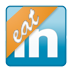
<style>
.page{position:relative;width:72px;height:72px;background:#ffffff}
.page>*{position:absolute;margin:0}
.t1{font:30px "BrushScriptStd"}
</style>
<div class="page">
<p class="t1" style="left:13px;top:8px;width:26px;height:35px;rotate:-46deg">eat</p>
</div>
